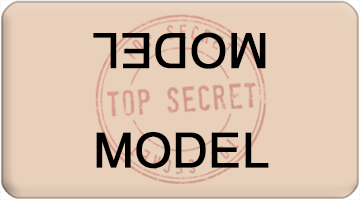
<style>
.page{position:relative;width:360px;height:200px;background:#e8d0bb}
.page>*{position:absolute;margin:0}
.t1{font:48px "ArialMT";color:#000000;font-weight:bold}
</style>
<div class="page">
<p class="t1" style="left:93px;top:32px;width:173px;height:37px;rotate:180deg">MODEL</p>
<p class="t1" style="left:96px;top:132px;width:173px;height:37px">MODEL</p>
</div>
